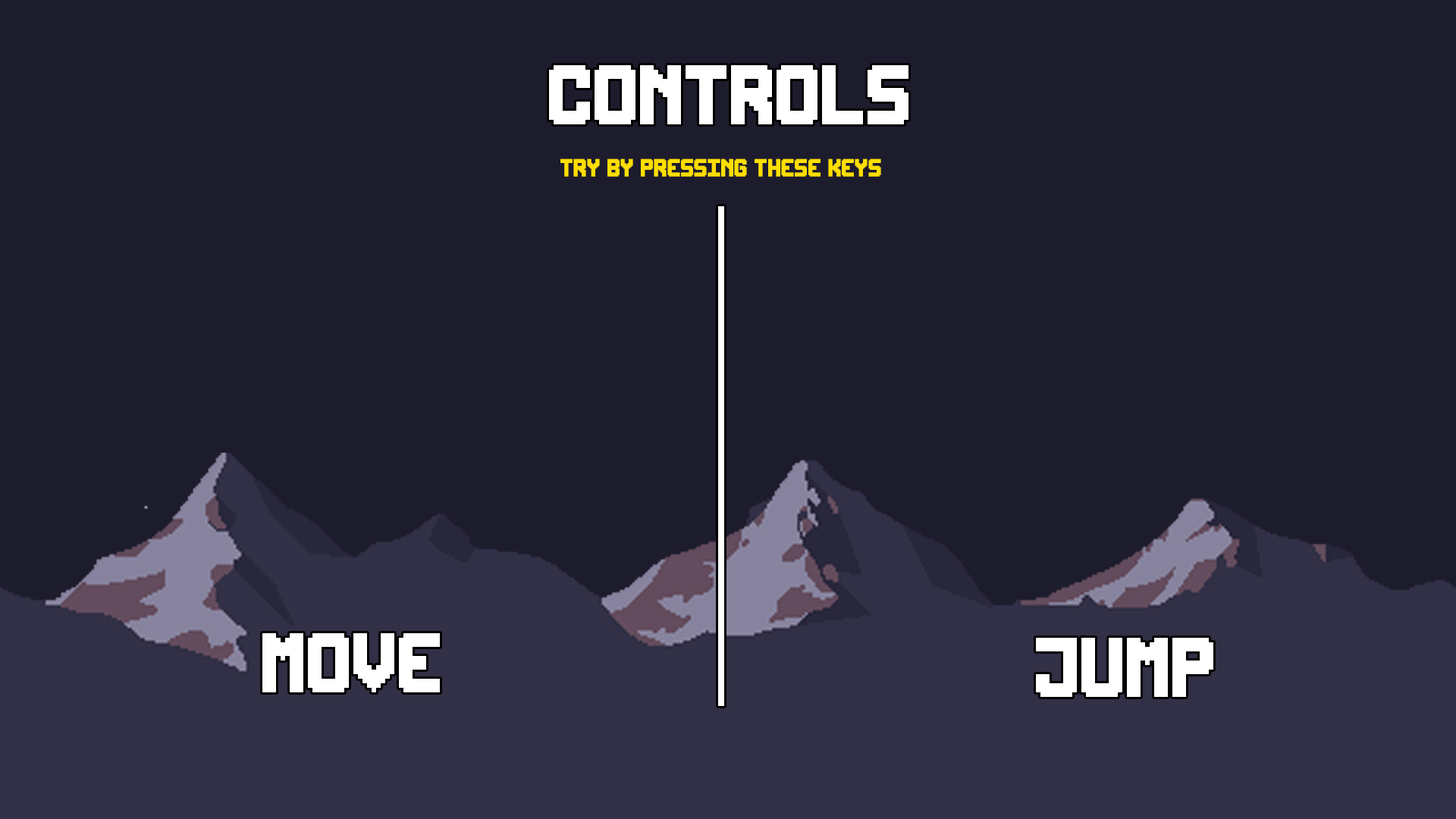
<style>
.page{position:relative;width:1456px;height:819px;background:#1d1c2d}
.page>*{position:absolute;margin:0}
.t1{font:72.8px "Round9x13";color:#ffffff}
.t2{font:21.4px "Round9x13";color:#ffde00}
</style>
<div class="page">
<p class="t1" style="left:549px;top:65px;width:359px;height:59px">CONTROLS</p>
<p class="t2" style="left:560px;top:158px;width:321px;height:19px">Try by pressing these keys</p>
<p class="t1" style="left:262px;top:633px;width:178px;height:59px">MOVE</p>
<p class="t1" style="left:1036px;top:638px;width:177px;height:59px">JUMP</p>
</div>
